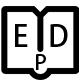
<style>
.page{position:relative;width:80px;height:80px;background:#ffffff}
.page>*{position:absolute;margin:0}
.t1{font:29.2px "AdobeHeitiStd-Regular";color:#000000}
.t2{font:20.8px "AdobeHeitiStd-Regular";color:#000000}
</style>
<div class="page">
<p class="t1" style="left:15px;top:24px;width:53px;height:23px">E   D</p>
<p class="t2" style="left:36px;top:54px;width:10px;height:16px">P</p>
</div>
